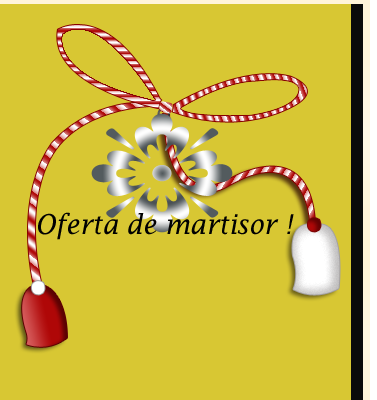
<style>
.page{position:relative;width:377px;height:400px;background:#d8c733}
.page>*{position:absolute;margin:0}
.t1{font:27.2px "LucidaFax-Italic";color:#010101;scale:0.95 1}
</style>
<div class="page">
<p class="t1" style="left:38px;top:212px;width:256px;height:28px">Oferta de martisor !</p>
</div>
